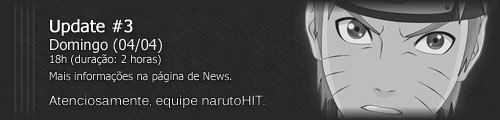
<style>
.page{position:relative;width:500px;height:120px}
.page>*{position:absolute;margin:0}
.t1{font:11px "Tahoma";color:#ffffff}
.t2{font:17px "Tahoma";color:#ffffff;font-weight:bold}
.t3{font:15px "Tahoma";color:#ffffff}
.t4{font:13px "Kalinga";color:#e8e8e8}
</style>
<div class="page">
<p class="t1" style="left:49px;top:19px;width:183px;height:64px"><span class="t2">Update #3<br></span><span class="t3">Domingo (04/04)<br></span>18h (duração: 2 horas)<br> <br>Mais informações na página de News.</p>
<p class="t4" style="left:49px;top:95px;width:216px;height:13px">Atenciosamente, equipe narutoHIT.</p>
</div>
